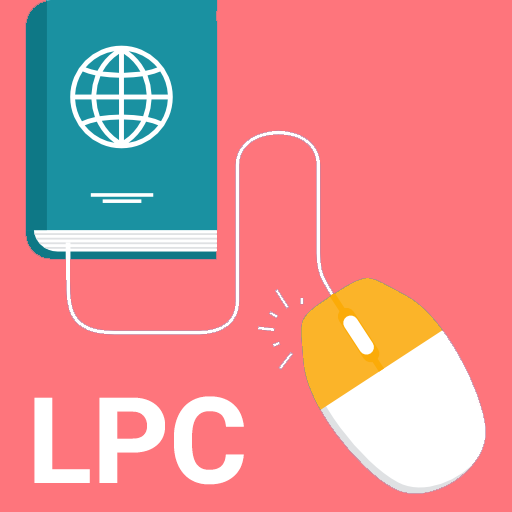
<style>
.page{position:relative;width:512px;height:512px;background:#fe757c}
.page>*{position:absolute;margin:0}
.t1{font:120px "Roboto-Bold";color:#ffffff}
</style>
<div class="page">
<p class="t1" style="left:34px;top:396px;width:210px;height:89px">LPC</p>
</div>
